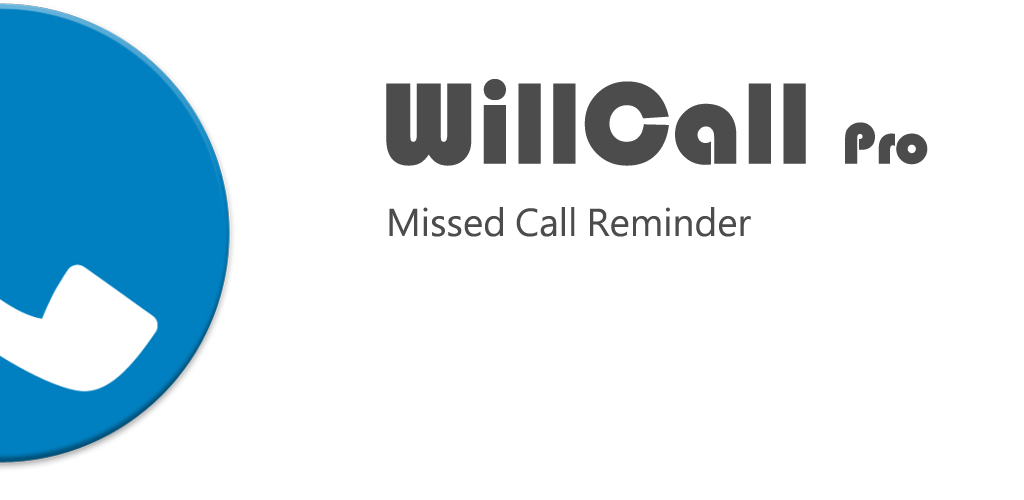
<style>
.page{position:relative;width:1024px;height:500px;background:#ffffff}
.page>*{position:absolute;margin:0}
.t1{font:120px "Bauhaus93";color:#4c4c4c}
.t2{font:60px "Bauhaus93";color:#4c4c4c}
.t3{font:36px "MicrosoftJhengHeiUIRegular";color:#4c4c4c}
</style>
<div class="page">
<p class="t1" style="left:386px;top:79px;width:542px;height:87px">WillCall <span class="t2">Pro</span></p>
<p class="t3" style="left:389px;top:207px;width:362px;height:30px">Missed Call Reminder</p>
</div>
